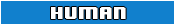
<style>
.page{position:relative;width:175px;height:25px;background:#1180cd}
.page>*{position:absolute;margin:0}
.t1{font:14px "8BITWONDERNominal";color:#ffffff}
</style>
<div class="page">
<p class="t1" style="left:51px;top:7px;width:75px;height:12px">Human</p>
</div>
